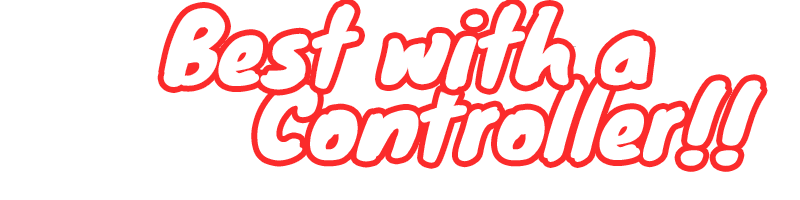
<style>
.page{position:relative;width:800px;height:200px;background:#ffffff}
.page>*{position:absolute;margin:0}
.t1{font:93.2px "Knewave-Regular";color:#ffffff}
</style>
<div class="page">
<p class="t1" style="left:163px;top:4px;width:487px;height:86px">Best with a</p>
</div>
